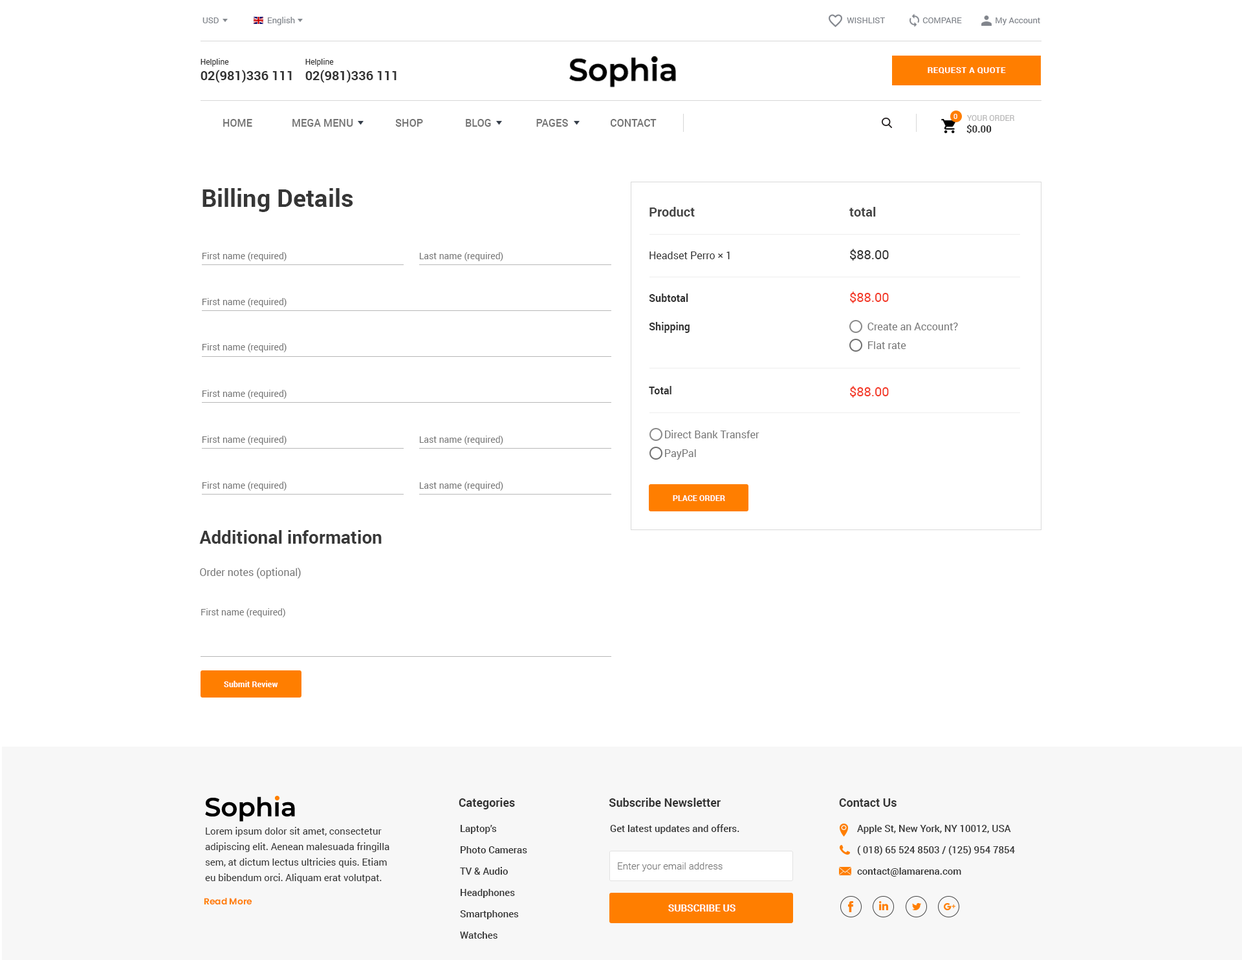
<style>
.page{position:relative;width:1242px;height:960px;background:#ffffff}
.page>*{position:absolute;margin:0}
.t1{font:8.4px "Roboto-Regular";color:#81858c}
.t2{font:12.9px "Roboto-Bold";color:#333333}
.t3{font:7.8px "Roboto-Regular";color:#333333}
.t4{font:8.4px "Roboto-Bold";letter-spacing:0.04em;color:#ffffff}
.t5{font:7.1px "Roboto-Regular";color:#ffffff}
.t6{font:10.3px "Roboto-Medium";color:#737373}
.t7{font:9.7px "Roboto-Bold";color:#333333}
.t8{font:7.8px "Roboto-Regular";color:#b8b7b7}
.t9{font:24.6px "Roboto-Bold";color:#363636}
.t10{font:10.3px/15.5px "Roboto-Regular";color:#787878}
.t11{font:12.9px/14.2px "Roboto-Bold";color:#444444}
.t12{font:10.3px/14.2px "Roboto-Regular";color:#333333}
.t13{font:10.3px/14.2px "Roboto-Bold";color:#333333}
.t14{font:10.3px/21.3px "Roboto-Bold";color:#333333}
.t15{font:10.3px/18.8px "Roboto-Regular";color:#787878}
.t16{font:10.3px/14.2px "Roboto-Regular";color:#787878}
.t17{font:12.9px/14.2px "Roboto-Regular";color:#333333}
.t18{font:12.9px/14.2px "Roboto-Regular";color:#f33927}
.t19{font:12.9px/18.8px "Roboto-Regular";color:#f33927}
.t20{font:9.1px "Roboto-Regular";color:#777777}
.t21{font:7.8px "Roboto-Bold";color:#ffffff;scale:1.03 1}
.t22{font:18.1px/16.2px "Roboto-Bold";color:#383838}
.t23{font:10.3px/16.2px "Roboto-Regular";color:#777777}
.t24{font:9px "Roboto-Regular";color:#777777}
.t25{font:11.6px "Roboto-Bold";color:#333333}
.t26{font:9.7px/15.5px "Roboto-Regular";color:#333333}
.t27{font:9.7px/21.3px "Roboto-Medium";color:#333333}
.t28{font:9.7px "Roboto-Medium";color:#333333}
.t29{font:9.7px "Roboto-Light";color:#777777}
.t30{font:8.8px "Poppins-SemiBold";color:#ff7e00}
.t31{font:9.7px "Roboto-Bold";color:#ffffff}
</style>
<div class="page">
<p class="t1" style="left:202px;top:17px;width:17px;height:6px">USD</p>
<p class="t1" style="left:268px;top:17px;width:27px;height:8px">English</p>
<p class="t1" style="left:847px;top:17px;width:193px;height:8px">WISHLIST                  COMPARE                My Account</p>
<p class="t2" style="left:200px;top:58px;width:92px;height:25px"><span class="t3">Helpline<br></span>02(981)336 111</p>
<p class="t2" style="left:305px;top:58px;width:91px;height:25px"><span class="t3">Helpline<br></span>02(981)336 111</p>
<p class="t4" style="left:927px;top:67px;width:79px;height:7px">REQUEST A QUOTE</p>
<p class="t5" style="left:953px;top:114px;width:4px;height:5px">0</p>
<p class="t6" style="left:223px;top:119px;width:433px;height:8px">HOME               MEGA MENU                SHOP                BLOG                 PAGES                CONTACT</p>
<p class="t7" style="left:966px;top:124px;width:25px;height:10px">$0.00</p>
<p class="t8" style="left:967px;top:115px;width:47px;height:6px">YOUR ORDER</p>
<p class="t9" style="left:202px;top:188px;width:151px;height:24px">Billing Details</p>
<p class="t10" style="left:649px;top:207px;width:110px;height:253px"><span class="t11">Product<br><br><br></span><span class="t12">Headset Perro × 1 <br><br><br></span><span class="t13">Subtotal <br><br>Shipping<br><br><br><br></span><span class="t14">Total<br><br><br></span>      Direct Bank Transfer<br><span class="t15">      PayPal</span></p>
<p class="t16" style="left:849px;top:207px;width:109px;height:191px"><span class="t11">total<br><br><br></span><span class="t17">$88.00 <br><br><br></span><span class="t18">$88.00  <br><br></span>       Create an Account?<br><span class="t15">       Flat rate<br><br><br></span><span class="t19">$88.00</span></p>
<p class="t20" style="left:202px;top:252px;width:84px;height:9px">First name (required)</p>
<p class="t20" style="left:419px;top:252px;width:84px;height:9px">Last name (required)</p>
<p class="t20" style="left:202px;top:298px;width:84px;height:9px">First name (required)</p>
<p class="t20" style="left:202px;top:343px;width:84px;height:9px">First name (required)</p>
<p class="t20" style="left:202px;top:390px;width:84px;height:9px">First name (required)</p>
<p class="t20" style="left:202px;top:436px;width:84px;height:9px">First name (required)</p>
<p class="t20" style="left:419px;top:436px;width:84px;height:9px">Last name (required)</p>
<p class="t20" style="left:202px;top:482px;width:84px;height:9px">First name (required)</p>
<p class="t20" style="left:419px;top:482px;width:84px;height:9px">Last name (required)</p>
<p class="t21" style="left:673px;top:495px;width:52px;height:6px">PLACE ORDER</p>
<p class="t22" style="left:199px;top:530px;width:183px;height:49px">Additional information<br><br><span class="t23">Order notes (optional)</span></p>
<p class="t24" style="left:201px;top:609px;width:84px;height:9px">First name (required)</p>
<p class="t21" style="left:224px;top:681px;width:54px;height:6px">Submit Review</p>
<p class="t25" style="left:459px;top:798px;width:56px;height:12px">Categories</p>
<p class="t25" style="left:609px;top:798px;width:111px;height:9px">Subscribe Newsletter</p>
<p class="t25" style="left:839px;top:799px;width:57px;height:8px">Contact Us</p>
<p class="t26" style="left:205px;top:827px;width:184px;height:56px">Lorem ipsum dolor sit amet, consectetur adipiscing elit. Aenean malesuada fringilla sem, at dictum lectus ultricies quis. Etiam eu bibendum orci. Aliquam erat volutpat.</p>
<p class="t27" style="left:460px;top:825px;width:67px;height:114px">Laptop’s<br>Photo Cameras<br>TV &amp; Audio<br>Headphones<br>Smartphones<br>Watches</p>
<p class="t28" style="left:610px;top:825px;width:129px;height:9px">Get latest updates and offers.</p>
<p class="t27" style="left:857px;top:825px;width:158px;height:52px">Apple St, New York, NY 10012, USA<br>( 018) 65 524 8503 / (125) 954 7854<br>contact@lamarena.com</p>
<p class="t29" style="left:618px;top:863px;width:104px;height:9px">Enter your email address</p>
<p class="t30" style="left:204px;top:898px;width:48px;height:7px">Read More</p>
<p class="t31" style="left:668px;top:905px;width:67px;height:7px">SUBSCRIBE US</p>
</div>
